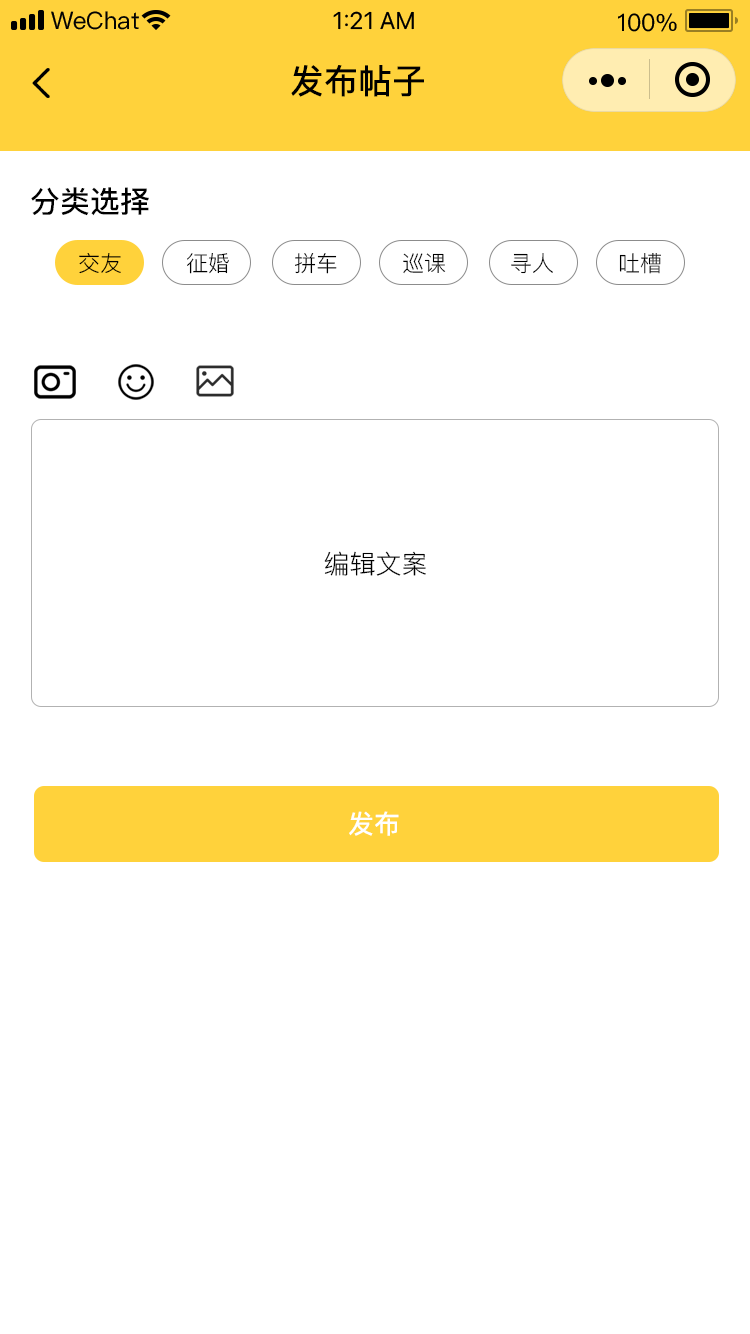
<style>
.page{position:relative;width:750px;height:1334px;background:#ffffff}
.page>*{position:absolute;margin:0}
.t1{font:34px "PingFang-SC-Bold";color:#000000}
.t2{font:30px "PingFang-SC-Bold";color:#000000}
.t3{font:22px "PingFang-SC-Regular";color:#000000}
.t4{font:26px "PingFang-SC-Regular";color:#000000}
.t5{font:26px "PingFang-SC-Bold";color:#ffffff}
</style>
<div class="page">
<p class="t1" style="left:291px;top:65px;width:133px;height:32px">发布帖子</p>
<p class="t2" style="left:31px;top:187px;width:118px;height:29px">分类选择</p>
<p class="t3" style="left:79px;top:253px;width:582px;height:21px">交友  征婚  拼车  巡课  寻人  吐槽</p>
<p class="t4" style="left:324px;top:551px;width:102px;height:25px">编辑文案</p>
<p class="t5" style="left:349px;top:811px;width:50px;height:25px">发布</p>
</div>
